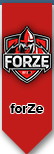
<style>
.page{position:relative;width:54px;height:154px;background:#c11c1a}
.page>*{position:absolute;margin:0}
.t1{font:11.7px "Arial-Black";letter-spacing:-0.01em;color:#000000}
</style>
<div class="page">
<p class="t1" style="left:10px;top:104px;width:34px;height:9px">forZe</p>
</div>
